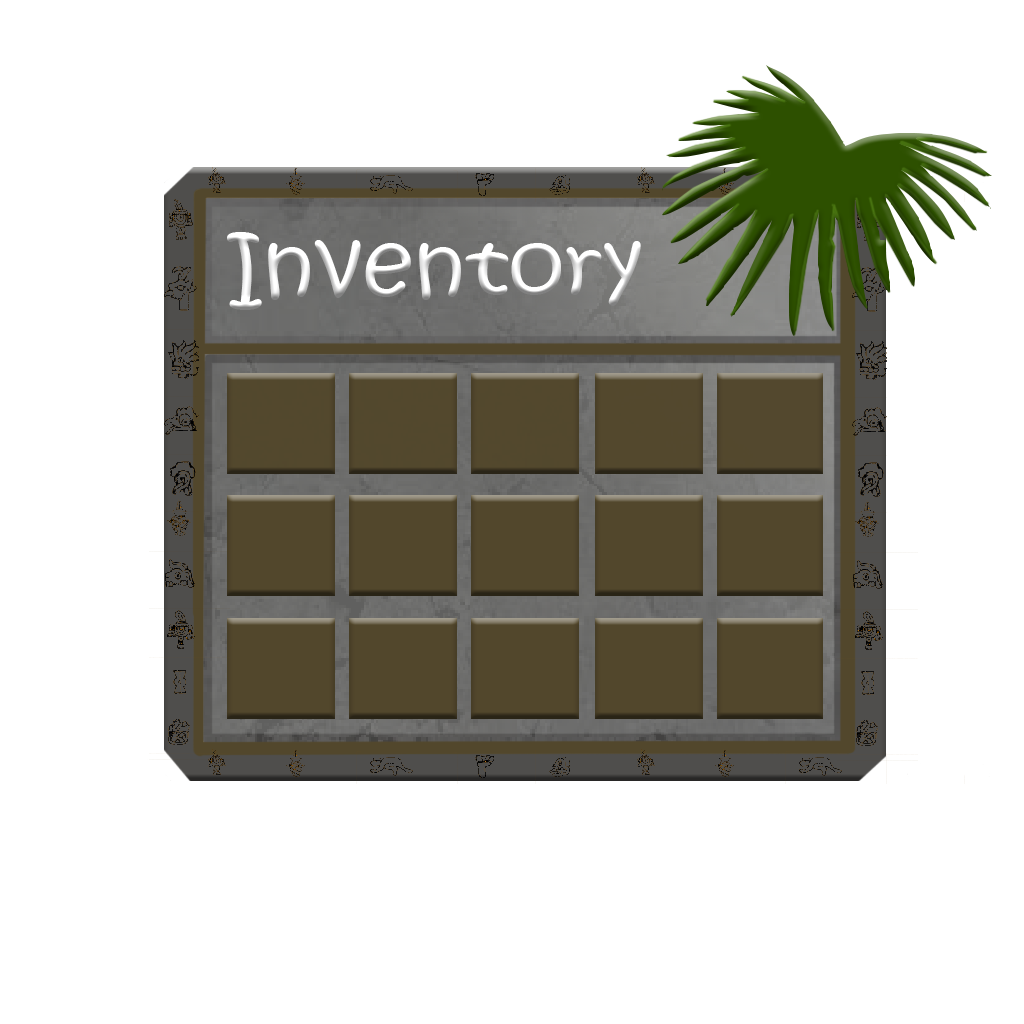
<style>
.page{position:relative;width:1024px;height:1024px;background:#ffffff}
.page>*{position:absolute;margin:0}
.t1{font:85.9px "KristenITC-Regular";scale:1.04 1}
</style>
<div class="page">
<p class="t1" style="left:227px;top:232px;width:414px;height:78px">Inventory</p>
</div>
